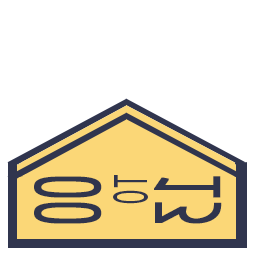
<style>
.page{position:relative;width:256px;height:256px;background:#ffffff}
.page>*{position:absolute;margin:0}
.t1{font:96px/48px "OratorStd";letter-spacing:-0.14em;color:#30354d;font-weight:bold;scale:0.55 1}
.t2{font:64px/48px "OratorStd";letter-spacing:-0.14em;color:#30354d;scale:0.55 1}
.t3{font:96px/72px "OratorStd";letter-spacing:-0.14em;color:#30354d;font-weight:bold;scale:0.55 1}
</style>
<div class="page">
<p class="t1" style="left:34px;top:175px;width:188px;height:49px;rotate:90deg">00<br><span class="t2">to<br></span><span class="t3">13</span></p>
</div>
